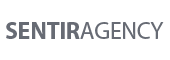
<style>
.page{position:relative;width:170px;height:60px;background:#ffffff}
.page>*{position:absolute;margin:0}
.t1{font:24px "MyriadPro-Bold";letter-spacing:-0.01em;color:#676b74}
.t2{font:24px "MyriadPro-Regular";letter-spacing:-0.01em;color:#676b74}
</style>
<div class="page">
<p class="t1" style="left:6px;top:22px;width:158px;height:17px">SENTIR<span class="t2">AGENCY</span></p>
</div>
